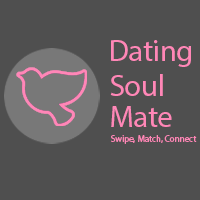
<style>
.page{position:relative;width:200px;height:200px;background:#4f4f4f}
.page>*{position:absolute;margin:0}
.t1{font:30px "MyriadPro-Regular";color:#ff87b7}
.t2{font:9px "MyriadPro-Regular";color:#ff87b7}
</style>
<div class="page">
<p class="t1" style="left:111px;top:40px;width:80px;height:27px">Dating</p>
<p class="t1" style="left:110px;top:74px;width:53px;height:22px">Soul</p>
<p class="t1" style="left:111px;top:106px;width:61px;height:21px">Mate</p>
<p class="t2" style="left:111px;top:135px;width:86px;height:9px">Swipe, Match, Connect</p>
</div>
